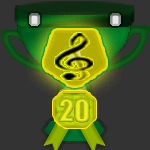
<style>
.page{position:relative;width:150px;height:150px;background:#333333}
.page>*{position:absolute;margin:0}
.t1{font:28.2px "Impact";color:#e1e518;scale:1.06 1}
</style>
<div class="page">
<p class="t1" style="left:59px;top:98px;width:30px;height:24px">20</p>
</div>
